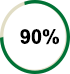
<style>
.page{position:relative;width:70px;height:74px;background:#ffffff}
.page>*{position:absolute;margin:0}
.t1{font:19.9px "Arial-BoldMT";color:#000000}
</style>
<div class="page">
<p class="t1" style="left:20px;top:29px;width:39px;height:16px">90%</p>
</div>
